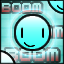
<style>
.page{position:relative;width:64px;height:64px}
.page>*{position:absolute;margin:0}
.t1{font:9px "M41_LOVEBIT"}
.t2{font:12px "M41_LOVEBIT"}
</style>
<div class="page">
<p class="t1" style="left:1px;top:3px;width:41px;height:9px">BOOM</p>
<p class="t2" style="left:6px;top:49px;width:53px;height:12px">BOOM</p>
</div>
